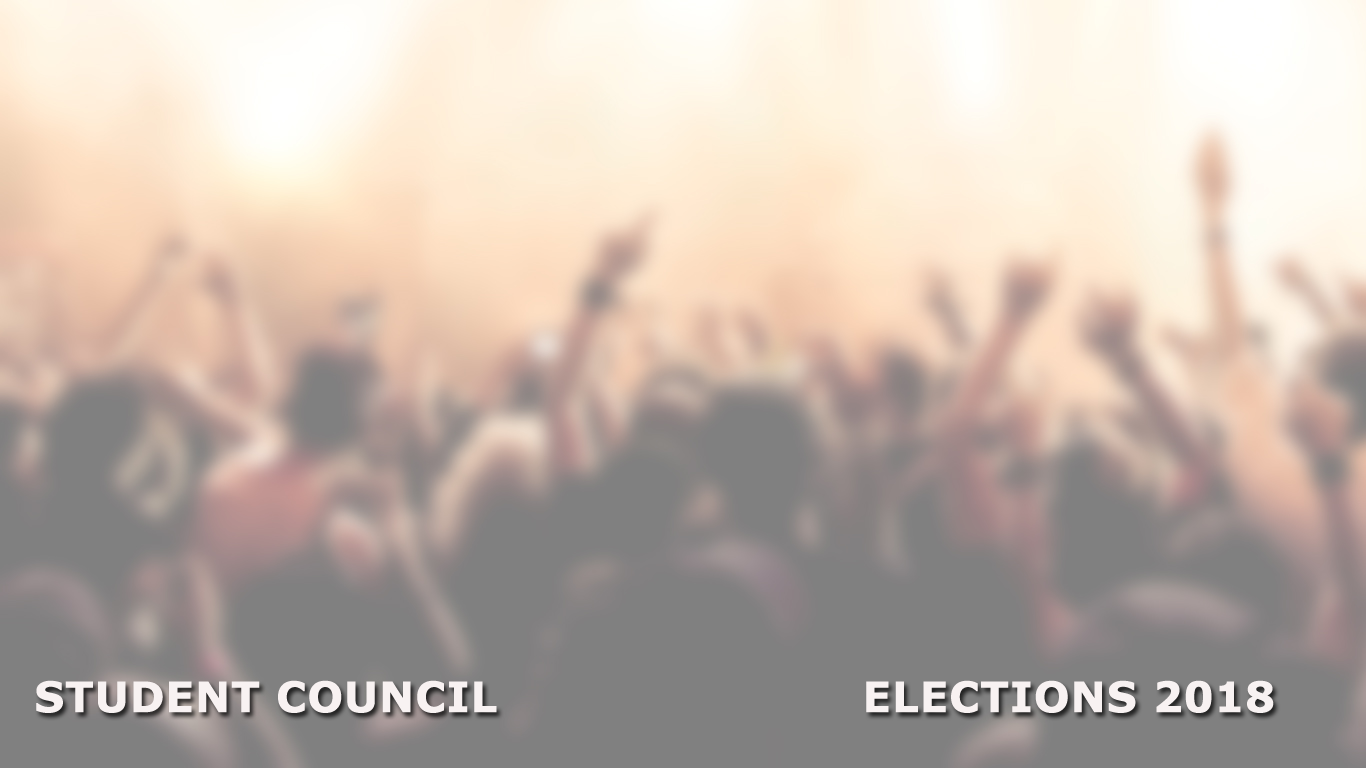
<style>
.page{position:relative;width:1366px;height:768px}
.page>*{position:absolute;margin:0}
.t1{font:41.7px "Verdana-Bold";color:#f8f2f2;text-transform:uppercase;font-weight:bold}
</style>
<div class="page">
<p class="t1" style="left:36px;top:680px;width:1238px;height:33px">student council           elections 2018</p>
</div>
